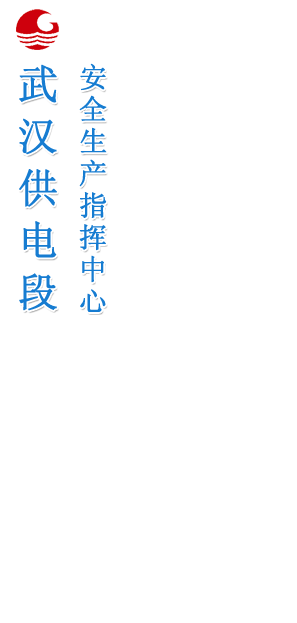
<style>
.page{position:relative;width:297px;height:623px;background:#ffffff}
.page>*{position:absolute;margin:0}
.t1{font:40px/52px "SimSun";color:#167cd1;font-weight:bold}
.t2{font:28px/32px "SimSun";color:#167cd1;font-weight:bold}
</style>
<div class="page">
<p class="t1" style="left:19px;top:64px;width:38px;height:247px">武<br>汉<br>供<br>电<br>段</p>
<p class="t2" style="left:79px;top:63px;width:28px;height:249px">安<br>全<br>生<br>产<br>指<br>挥<br>中<br>心</p>
</div>
